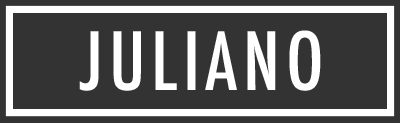
<style>
.page{position:relative;width:400px;height:123px;background:#333333}
.page>*{position:absolute;margin:0}
.t1{font:78px "Futura-CondensedMedium";letter-spacing:0.072em;color:#ffffff}
</style>
<div class="page">
<p class="t1" style="left:79px;top:30px;width:242px;height:61px">JULIANO</p>
</div>
